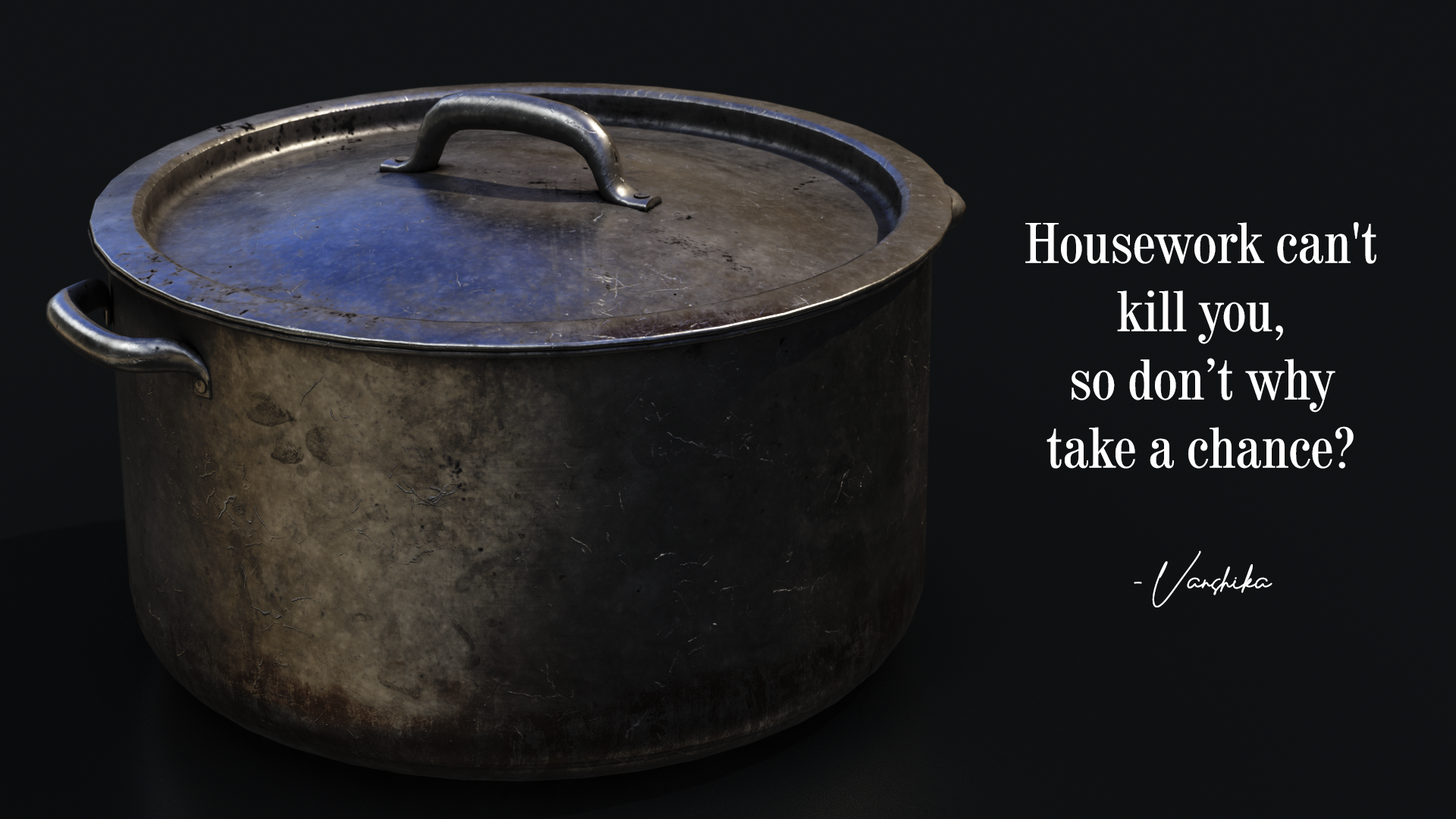
<style>
.page{position:relative;width:1456px;height:819px}
.page>*{position:absolute;margin:0}
.t1{font:56.9px "Century725BT-RomanCondensed";color:#ffffff}
.t2{font:56.9px "DarlingtonDemo";color:#ffffff}
</style>
<div class="page">
<p class="t1" style="left:1025px;top:222px;width:351px;height:385px;text-align:center">Housework can't kill you,<br>so don’t why take a chance?<br><span class="t2"><br>- Vanshika</span></p>
</div>
